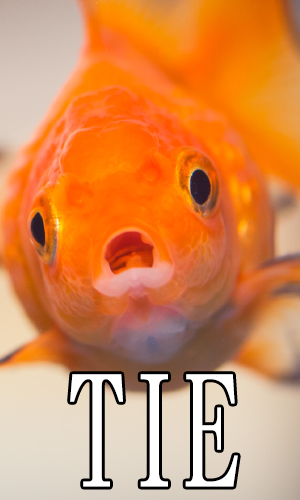
<style>
.page{position:relative;width:300px;height:500px}
.page>*{position:absolute;margin:0}
.t1{font:152px "DFKaiShu-SB-Estd-BF";color:#ffffff;scale:0.76 1}
</style>
<div class="page">
<p class="t1" style="left:70px;top:374px;width:168px;height:113px">TIE</p>
</div>
